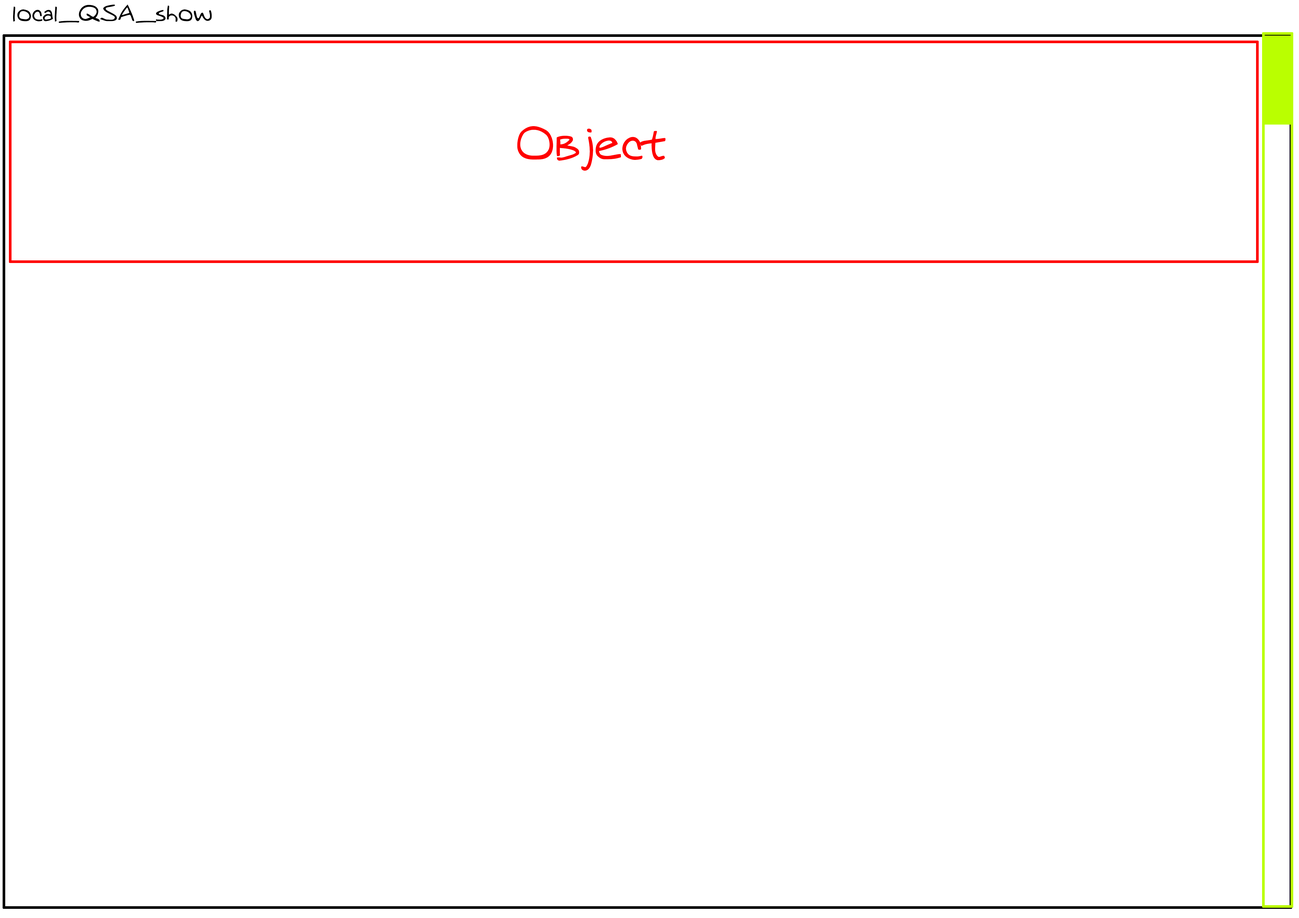
<style>
.page{position:relative;width:1299px;height:918px;background:#ffffff}
.page>*{position:absolute;margin:0}
.t1{font:21.8px "MTOaugie-Regular";color:#000000}
.t2{font:43.6px "MTOaugie-Regular";color:#ff0000}
</style>
<div class="page">
<p class="t1" style="left:13px;top:4px;width:199px;height:19px">local_QSA_show</p>
<p class="t2" style="left:517px;top:126px;width:148px;height:45px">Object</p>
</div>
